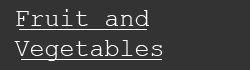
<style>
.page{position:relative;width:250px;height:70px;background:#333333}
.page>*{position:absolute;margin:0}
.t1{font:25px "CourierNewPSMT";color:#ffffff}
</style>
<div class="page">
<p class="t1" style="left:14px;top:9px;width:149px;height:52px">Fruit and<br>Vegetables</p>
</div>
